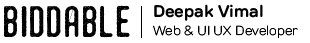
<style>
.page{position:relative;width:310px;height:43px;background:#ffffff}
.page>*{position:absolute;margin:0}
.t1{font:44px "HamurzFreeVersion";color:#000000}
.t2{font:13px/18px "TTRounds-Light";color:#000000}
.t3{font:17px/18px "TTRounds-Bold";color:#000000}
</style>
<div class="page">
<p class="t1" style="left:4px;top:5px;width:126px;height:33px">biddable</p>
<p class="t2" style="left:153px;top:4px;width:145px;height:34px"><span class="t3">Deepak Vimal<br></span>Web &amp; UI UX Developer</p>
</div>
